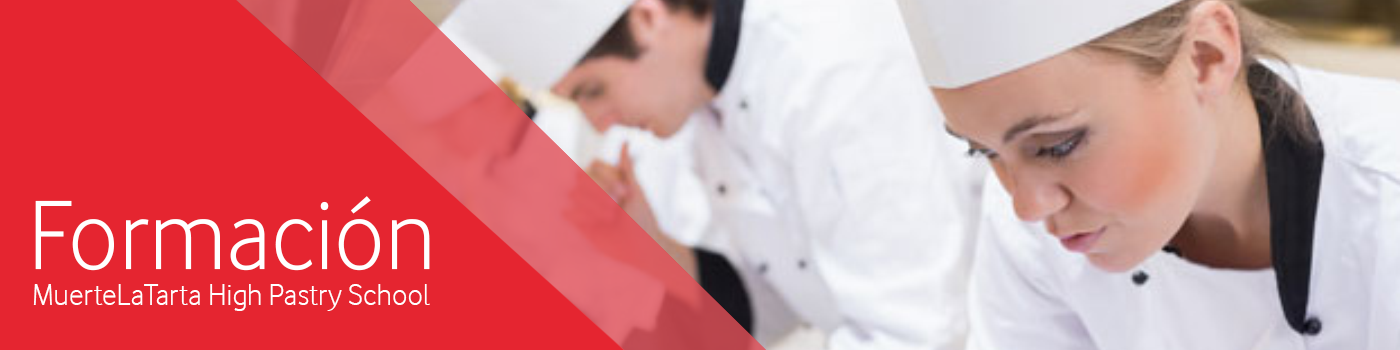
<style>
.page{position:relative;width:1400px;height:350px;background:#e52530}
.page>*{position:absolute;margin:0}
.t1{font:102px "VodafoneLt-Regular";color:#ffffff}
.t2{font:31px "VodafoneLt-Regular";color:#ffffff}
</style>
<div class="page">
<p class="t1" style="left:35px;top:196px;width:395px;height:75px">Formación</p>
<p class="t2" style="left:33px;top:284px;width:397px;height:27px">MuerteLaTarta High Pastry School</p>
</div>
